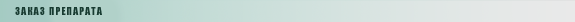
<style>
.page{position:relative;width:575px;height:22px}
.page>*{position:absolute;margin:0}
.t1{font:10px "Impact";letter-spacing:0.1em;color:#183b31}
</style>
<div class="page">
<p class="t1" style="left:15px;top:7px;width:87px;height:8px">ЗАКАЗ ПРЕПАРАТА</p>
</div>
